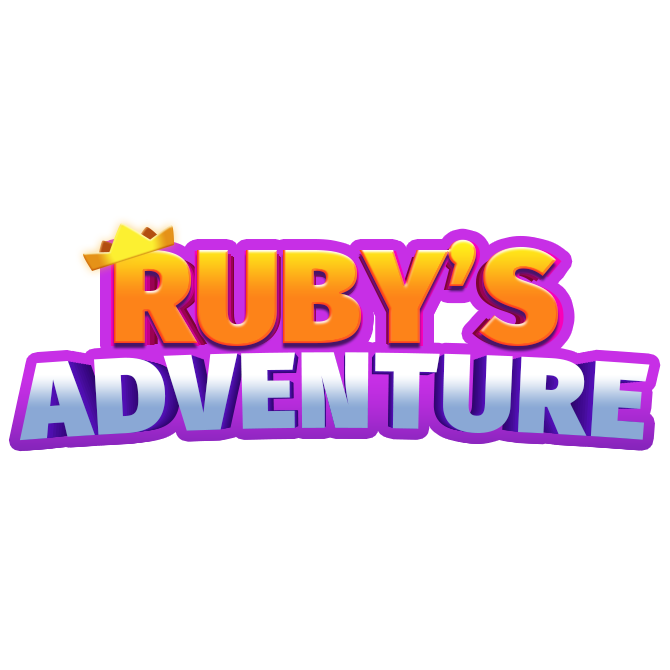
<style>
.page{position:relative;width:670px;height:670px;background:#ffffff}
.page>*{position:absolute;margin:0}
.t1{font:135.4px "FiraSans-Ultra"}
.t2{font:133px "FiraSans-Ultra"}
.t3{font:132.7px "FiraSans-Ultra"}
.t4{font:130.1px "FiraSans-Ultra"}
.t5{font:127.5px "FiraSans-Ultra"}
.t6{font:124.9px "FiraSans-Ultra"}
.t7{font:110.6px "FiraSans-Ultra";letter-spacing:0.025em}
.t8{font:109.5px "FiraSans-Ultra";letter-spacing:0.025em}
.t9{font:108.4px "FiraSans-Ultra";letter-spacing:0.025em}
.t10{font:107.3px "FiraSans-Ultra";letter-spacing:0.025em}
.t11{font:106.2px "FiraSans-Ultra";letter-spacing:0.025em}
.t12{font:105.1px "FiraSans-Ultra";letter-spacing:0.025em}
</style>
<div class="page">
<p class="t1" style="left:111px;top:240px;width:453px;height:109px">RUBY’S</p>
<p class="t2" style="left:114px;top:239px;width:444px;height:107px">RUBY’S</p>
<p class="t3" style="left:116px;top:242px;width:443px;height:107px">RUBY’S</p>
<p class="t4" style="left:120px;top:243px;width:436px;height:105px">RUBY’S</p>
<p class="t5" style="left:125px;top:245px;width:426px;height:103px">RUBY’S</p>
<p class="t6" style="left:129px;top:246px;width:417px;height:101px">RUBY’S</p>
<p class="t7" style="left:19px;top:352px;width:631px;height:89px">ADVENTURE</p>
<p class="t8" style="left:23px;top:352px;width:624px;height:88px">ADVENTURE</p>
<p class="t9" style="left:26px;top:353px;width:618px;height:87px">ADVENTURE</p>
<p class="t10" style="left:29px;top:353px;width:612px;height:87px">ADVENTURE</p>
<p class="t11" style="left:32px;top:354px;width:606px;height:85px">ADVENTURE</p>
<p class="t12" style="left:35px;top:354px;width:600px;height:85px">ADVENTURE</p>
</div>
